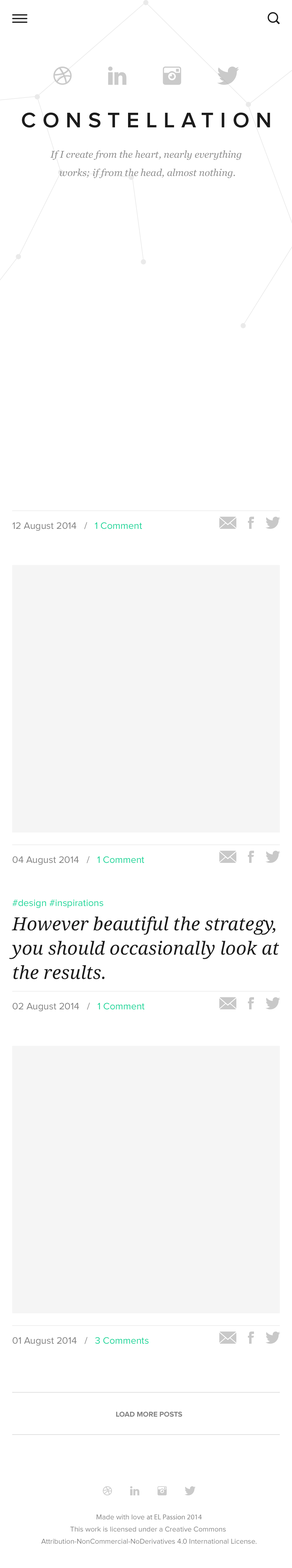
<style>
.page{position:relative;width:292px;height:1568px;background:#ffffff}
.page>*{position:absolute;margin:0}
.t1{font:21.9px "ProximaNova-Semibold";letter-spacing:0.3em;color:#1c1c1c;text-transform:uppercase}
.t2{font:9.7px/18.2px "Georgia-Italic";color:#8f8f8f}
.t3{font:9.7px "ProximaNova-Regular";color:#818181}
.t4{font:9.7px "ProximaNova-Regular";color:#16d598}
.t5{font:18.2px/24.3px "DroidSerif-Italic";color:#1c1c1c}
.t6{font:9.7px/12.2px "ProximaNova-Regular";color:#15d698}
.t7{font:7.3px "ProximaNova-Bold";color:#818181;text-transform:uppercase}
.t8{font:7.3px/12.2px "ProximaNova-Regular";color:#818181}
.t9{font:7.3px/12.2px "MyriadPro-Regular";color:#818181}
</style>
<div class="page">
<p class="t1" style="left:22px;top:112px;width:248px;height:16px">constellation</p>
<p class="t2" style="left:50px;top:150px;width:191px;height:28px;text-align:center">If I create from the heart, nearly everything <br>works; if from the head, almost nothing.</p>
<p class="t3" style="left:12px;top:522px;width:130px;height:9px">12 August 2014   /   <span class="t4">1 Comment</span></p>
<p class="t3" style="left:12px;top:856px;width:132px;height:9px">04 August 2014   /   <span class="t4">1 Comment</span></p>
<p class="t5" style="left:9px;top:899px;width:270px;height:80px"><span class="t6">#design #inspirations<br></span>However beautiful the strategy, you should occasionally look at the results.</p>
<p class="t3" style="left:12px;top:1003px;width:132px;height:8px">02 August 2014   /   <span class="t4">1 Comment</span></p>
<p class="t3" style="left:12px;top:1337px;width:137px;height:9px">01 August 2014   /   <span class="t4">3 Comments</span></p>
<p class="t7" style="left:116px;top:1411px;width:66px;height:6px">load more posts</p>
<p class="t8" style="left:41px;top:1514px;width:216px;height:30px;text-align:center">Made with love <span class="t9">at EL Passion 2014<br></span>This work is licensed under a Creative Commons <br>Attribution-NonCommercial-NoDerivatives 4.0 International License.</p>
</div>
